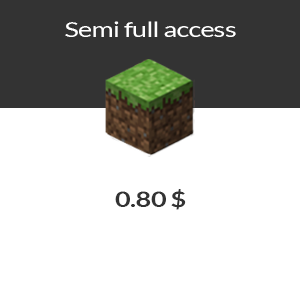
<style>
.page{position:relative;width:300px;height:304px;background:#ffffff}
.page>*{position:absolute;margin:0}
.t1{font:21.3px "Lato-Regular";letter-spacing:-0.025em;color:#ffffff;scale:1.26 1}
.t2{font:21.6px "Lato-Bold";letter-spacing:-0.025em;color:#333333;scale:1.26 1}
</style>
<div class="page">
<p class="t1" style="left:65px;top:21px;width:171px;height:16px">Semi full access</p>
<p class="t2" style="left:115px;top:189px;width:71px;height:21px">0.80 $</p>
</div>
